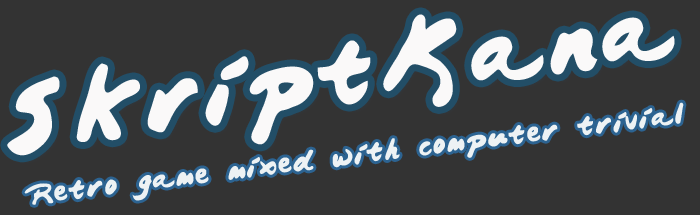
<style>
.page{position:relative;width:700px;height:215px;background:#333333}
.page>*{position:absolute;margin:0}
.t1{font:80px "JapaneseBrush";color:#faf9f9}
.t2{font:24px "JapaneseBrush";color:#edf2f4}
</style>
<div class="page">
<p class="t1" style="left:7px;top:14px;width:668px;height:142px;rotate:-8deg">SkriptKana</p>
<p class="t2" style="left:24px;top:102px;width:660px;height:103px;rotate:-7deg">Retro game mixed with computer trivial</p>
</div>
